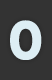
<style>
.page{position:relative;width:52px;height:80px;background:#333333}
.page>*{position:absolute;margin:0}
.t1{font:56.2px "Mont-Bold";color:#ddeef4;text-transform:uppercase;font-weight:bold}
</style>
<div class="page">
<p class="t1" style="left:10px;top:20px;width:32px;height:40px">0</p>
</div>
